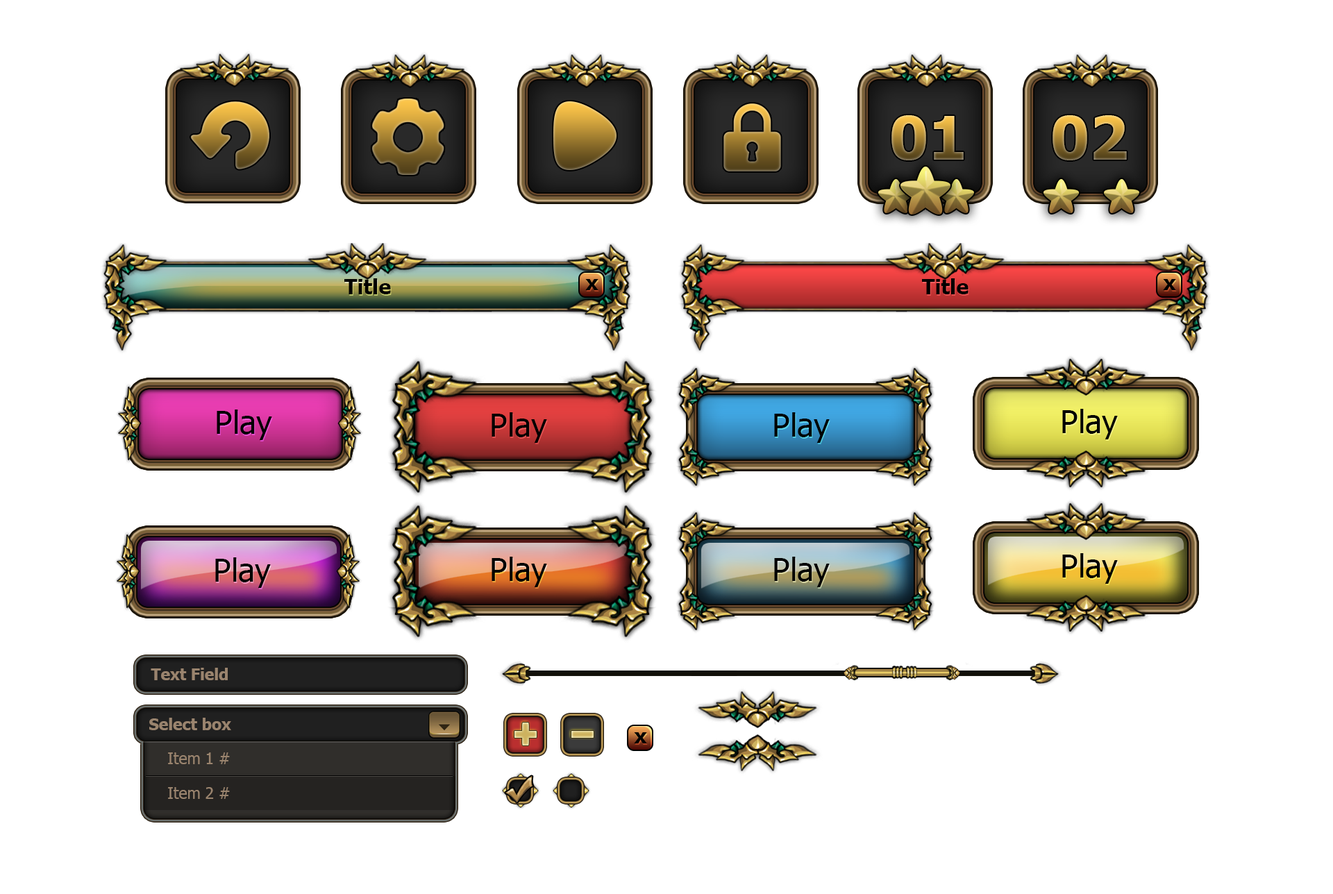
<style>
.page{position:relative;width:1333px;height:894px;background:#ffffff}
.page>*{position:absolute;margin:0}
.t1{font:60.5px "Tahoma-Bold"}
.t2{font:20.9px "Tahoma-Bold";color:#000000}
.t3{font:32.1px "Tahoma";color:#000000}
.t4{font:15.8px "Tahoma-Bold";color:#9a846e}
.t5{font:15.8px "Tahoma";color:#9a846e}
</style>
<div class="page">
<p class="t1" style="left:892px;top:115px;width:72px;height:45px">01</p>
<p class="t1" style="left:1053px;top:115px;width:74px;height:45px">02</p>
<p class="t2" style="left:344px;top:278px;width:47px;height:16px">Title</p>
<p class="t2" style="left:585px;top:279px;width:14px;height:11px">x</p>
<p class="t2" style="left:922px;top:278px;width:47px;height:16px">Title</p>
<p class="t2" style="left:1163px;top:279px;width:13px;height:11px">x</p>
<p class="t3" style="left:217px;top:410px;width:55px;height:30px">Play</p>
<p class="t3" style="left:217px;top:410px;width:55px;height:30px">Play</p>
<p class="t3" style="left:492px;top:412px;width:55px;height:31px">Play</p>
<p class="t3" style="left:492px;top:412px;width:55px;height:31px">Play</p>
<p class="t3" style="left:774px;top:412px;width:56px;height:31px">Play</p>
<p class="t3" style="left:774px;top:412px;width:56px;height:31px">Play</p>
<p class="t3" style="left:1062px;top:409px;width:56px;height:31px">Play</p>
<p class="t3" style="left:1062px;top:409px;width:56px;height:31px">Play</p>
<p class="t3" style="left:215px;top:558px;width:56px;height:30px">Play</p>
<p class="t3" style="left:215px;top:558px;width:56px;height:30px">Play</p>
<p class="t3" style="left:492px;top:557px;width:55px;height:30px">Play</p>
<p class="t3" style="left:492px;top:557px;width:55px;height:30px">Play</p>
<p class="t3" style="left:774px;top:557px;width:56px;height:30px">Play</p>
<p class="t3" style="left:774px;top:557px;width:56px;height:30px">Play</p>
<p class="t3" style="left:1062px;top:553px;width:56px;height:31px">Play</p>
<p class="t3" style="left:1062px;top:553px;width:56px;height:31px">Play</p>
<p class="t4" style="left:151px;top:668px;width:77px;height:13px">Text Field</p>
<p class="t4" style="left:149px;top:718px;width:82px;height:13px">Select box</p>
<p class="t2" style="left:634px;top:733px;width:13px;height:11px">x</p>
<p class="t5" style="left:168px;top:753px;width:62px;height:12px">Item 1 #</p>
<p class="t5" style="left:168px;top:787px;width:62px;height:12px">Item 2 #</p>
</div>
